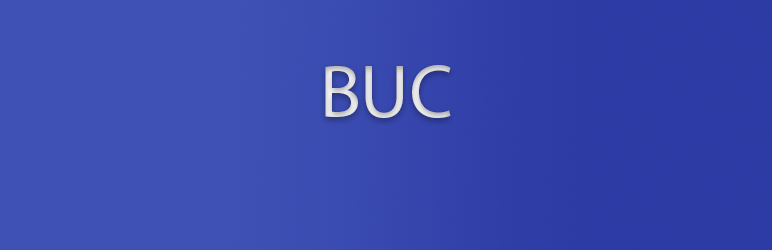
<style>
.page{position:relative;width:772px;height:250px;background:#3f51b5}
.page>*{position:absolute;margin:0}
.t1{font:75px "MyriadPro-Regular";color:#dddddd}
</style>
<div class="page">
<p class="t1" style="left:325px;top:65px;width:126px;height:53px">BUC</p>
</div>
